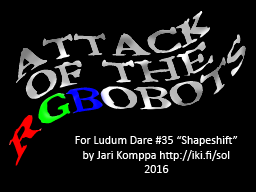
<style>
.page{position:relative;width:256px;height:192px;background:#000000}
.page>*{position:absolute;margin:0}
.t1{font:23.5px "Bedbug";scale:1.44 1}
.t2{font:12px "Calibri";color:#ffffff}
</style>
<div class="page">
<p class="t1" style="left:9px;top:11px;width:237px;height:155px;text-align:center;rotate:-27deg">Attack<br>of the<br>RGBobots</p>
<p class="t2" style="left:75px;top:136px;width:163px;height:37px;text-align:center">For Ludum Dare #35 “Shapeshift”<br>by Jari Komppa http://iki.fi/sol<br>2016</p>
</div>
